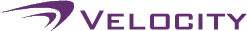
<style>
.page{position:relative;width:247px;height:31px;background:#ffffff}
.page>*{position:absolute;margin:0}
.t1{font:36px "BankGothic-Light";color:#632e72;font-weight:bold}
</style>
<div class="page">
<p class="t1" style="left:80px;top:10px;width:167px;height:20px">Velocity</p>
</div>
